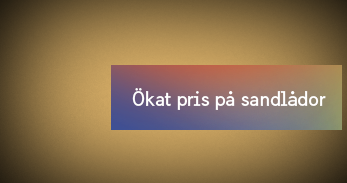
<style>
.page{position:relative;width:347px;height:183px}
.page>*{position:absolute;margin:0}
.t1{font:20px "SwedenSans";color:#ffffff}
</style>
<div class="page">
<p class="t1" style="left:132px;top:88px;width:194px;height:22px">Ökat pris på sandlådor</p>
</div>
